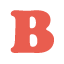
<style>
.page{position:relative;width:64px;height:64px;background:#ffffff}
.page>*{position:absolute;margin:0}
.t1{font:60px "CooperBlackStd";color:#e95d4f}
</style>
<div class="page">
<p class="t1" style="left:10px;top:10px;width:44px;height:43px">B</p>
</div>
